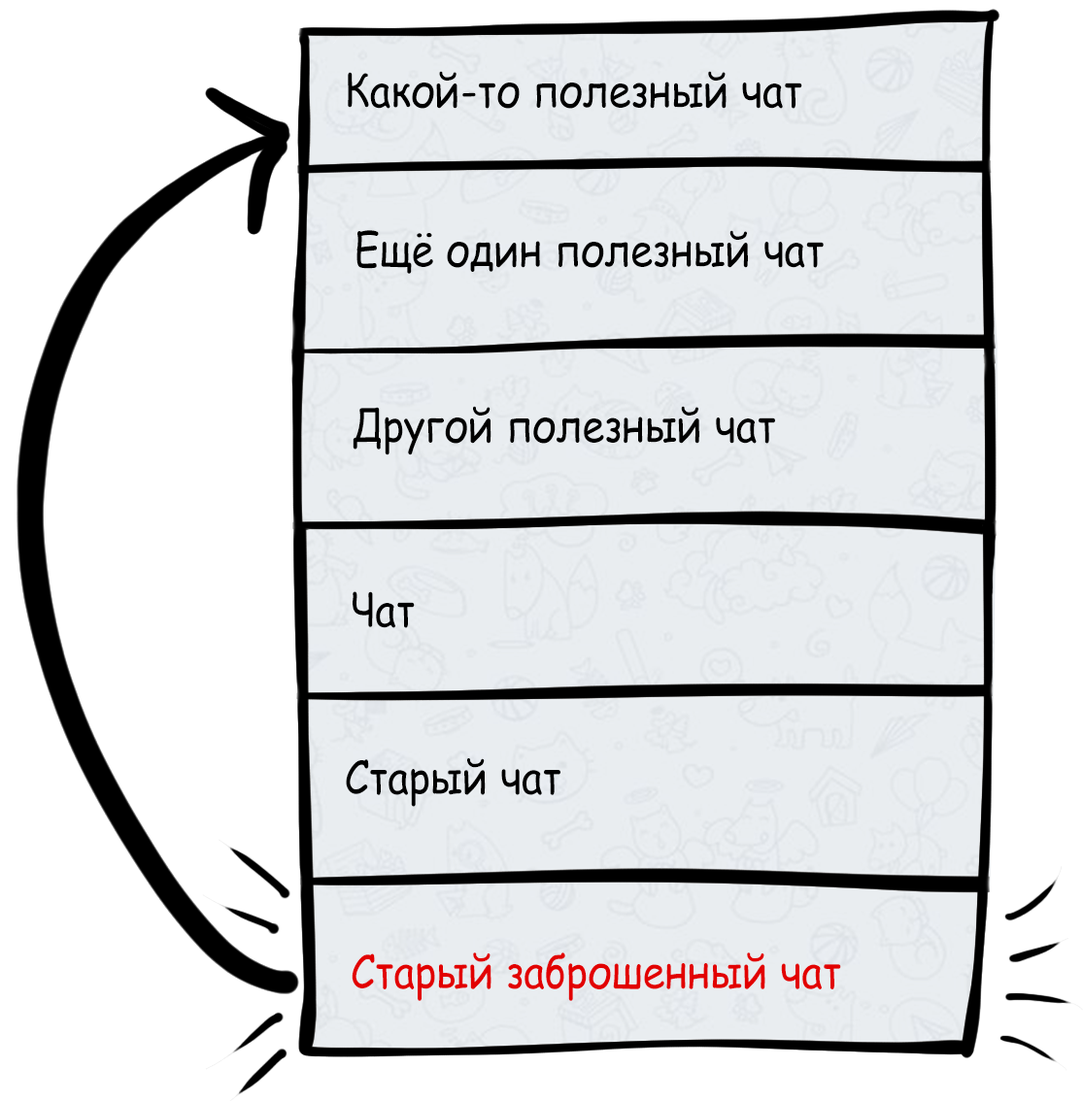
<style>
.page{position:relative;width:1083px;height:1101px;background:#ffffff}
.page>*{position:absolute;margin:0}
.t1{font:45.7px "ComicSansMS";color:#000000;scale:0.88 1}
.t2{font:45.7px "ComicSansMS";color:#e20000;scale:0.88 1}
</style>
<div class="page">
<p class="t1" style="left:348px;top:71px;width:454px;height:38px">Какой-то полезный чат</p>
<p class="t1" style="left:356px;top:230px;width:468px;height:44px">Ещё один полезный чат</p>
<p class="t1" style="left:353px;top:406px;width:422px;height:49px">Другой полезный чат</p>
<p class="t1" style="left:353px;top:591px;width:62px;height:37px">Чат</p>
<p class="t1" style="left:346px;top:758px;width:214px;height:49px">Старый чат</p>
<p class="t2" style="left:352px;top:953px;width:489px;height:48px">Старый заброшенный чат</p>
</div>
